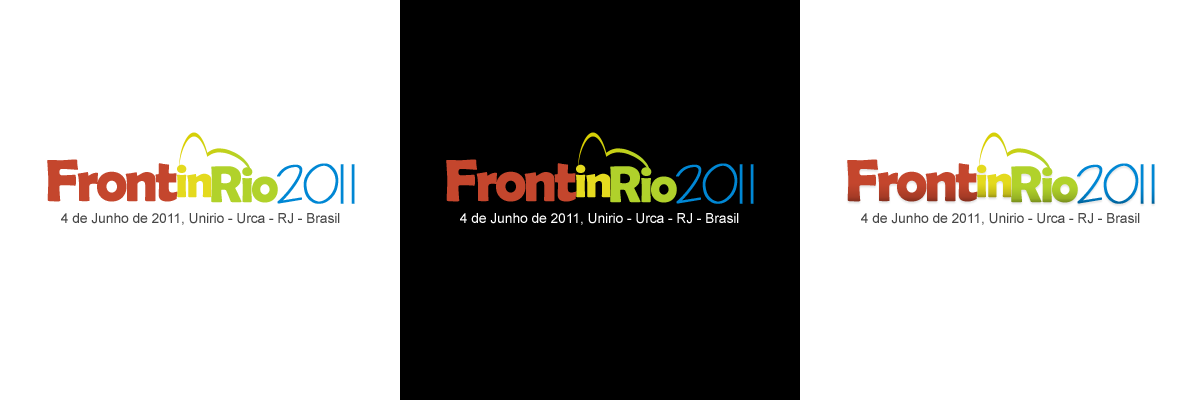
<style>
.page{position:relative;width:1200px;height:400px;background:#ffffff}
.page>*{position:absolute;margin:0}
.t1{font:60px "BerlinSansFBDemi-Bold";letter-spacing:-0.05em;color:#c4462d}
.t2{font:48px "BerlinSansFBDemi-Bold";letter-spacing:-0.05em;color:#e4da1f}
.t3{font:52px "BerlinSansFBDemi-Bold";letter-spacing:-0.05em;color:#b0d12b}
.t4{font:48px "CityBlueprint";letter-spacing:-0.05em;color:#0087d4;font-weight:bold}
.t5{font:14px "ArialMT";letter-spacing:-0.01em;color:#474747}
.t6{font:14px "ArialMT";letter-spacing:-0.01em;color:#ffffff}
</style>
<div class="page">
<p class="t1" style="left:47px;top:159px;width:131px;height:43px">Front</p>
<p class="t1" style="left:446px;top:159px;width:131px;height:43px">Front</p>
<p class="t1" style="left:847px;top:159px;width:131px;height:43px">Front</p>
<p class="t2" style="left:177px;top:164px;width:35px;height:34px">in</p>
<p class="t3" style="left:211px;top:166px;width:67px;height:37px">Rio</p>
<p class="t4" style="left:277px;top:163px;width:78px;height:41px">2011</p>
<p class="t2" style="left:576px;top:164px;width:35px;height:34px">in</p>
<p class="t3" style="left:610px;top:166px;width:67px;height:37px">Rio</p>
<p class="t4" style="left:676px;top:163px;width:78px;height:41px">2011</p>
<p class="t2" style="left:977px;top:164px;width:35px;height:34px">in</p>
<p class="t3" style="left:1011px;top:166px;width:67px;height:37px">Rio</p>
<p class="t4" style="left:1077px;top:163px;width:78px;height:41px">2011</p>
<p class="t5" style="left:61px;top:213px;width:279px;height:12px">4 de Junho de 2011, Unirio - Urca - RJ - Brasil</p>
<p class="t6" style="left:460px;top:213px;width:279px;height:12px">4 de Junho de 2011, Unirio - Urca - RJ - Brasil</p>
<p class="t5" style="left:861px;top:213px;width:279px;height:12px">4 de Junho de 2011, Unirio - Urca - RJ - Brasil</p>
</div>
